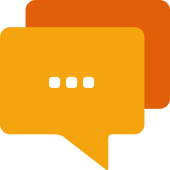
<style>
.page{position:relative;width:170px;height:170px;background:#f4a40c}
.page>*{position:absolute;margin:0}
.t1{font:68px "MuseoSansRounded-900";color:#ffffff}
</style>
<div class="page">
<p class="t1" style="left:49px;top:76px;width:46px;height:12px">...</p>
</div>
